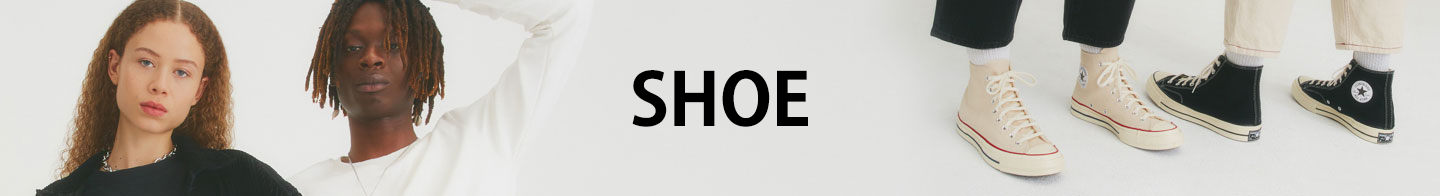
<style>
.page{position:relative;width:1440px;height:196px}
.page>*{position:absolute;margin:0}
.t1{font:72px "AdobeGothicStd-Bold";color:#000000}
</style>
<div class="page">
<p class="t1" style="left:632px;top:70px;width:176px;height:57px">SHOE</p>
</div>
